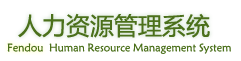
<style>
.page{position:relative;width:241px;height:61px;background:#ffffff}
.page>*{position:absolute;margin:0}
.t1{font:24px "MicrosoftYaHei";color:#4b701b}
.t2{font:11px "STXinwei";color:#4b701b}
</style>
<div class="page">
<p class="t1" style="left:18px;top:13px;width:192px;height:25px">人力资源管理系统</p>
<p class="t2" style="left:7px;top:43px;width:36px;height:9px">Fendou</p>
<p class="t2" style="left:49px;top:43px;width:182px;height:11px">Human Resource Management System</p>
</div>
